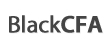
<style>
.page{position:relative;width:110px;height:50px;background:#ffffff}
.page>*{position:absolute;margin:0}
.t1{font:24px "MyriadPro-Regular";letter-spacing:-0.02em;color:#444444;font-weight:bold}
.t2{font:24px "MyriadPro-Semibold";letter-spacing:-0.02em;color:#444444;font-weight:bold}
</style>
<div class="page">
<p class="t1" style="left:9px;top:15px;width:94px;height:18px">Black<span class="t2">CFA</span></p>
</div>
